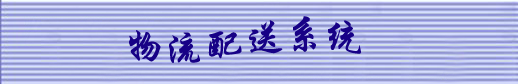
<style>
.page{position:relative;width:518px;height:84px}
.page>*{position:absolute;margin:0}
.t1{font:40px "STXingkai";color:#170186}
</style>
<div class="page">
<p class="t1" style="left:129px;top:16px;width:232px;height:47px">物流配送系统</p>
</div>
